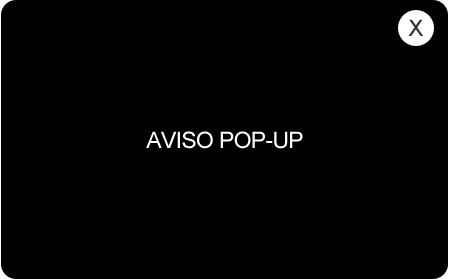
<style>
.page{position:relative;width:450px;height:279px;background:#000000}
.page>*{position:absolute;margin:0}
.t1{font:22.8px "ArialMT";letter-spacing:-0.025em;color:#343434}
.t2{font:22.8px "ArialMT";letter-spacing:-0.025em;color:#ffffff}
</style>
<div class="page">
<p class="t1" style="left:408px;top:19px;width:16px;height:17px">X</p>
<p class="t2" style="left:146px;top:131px;width:157px;height:18px">AVISO POP-UP</p>
</div>
